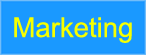
<style>
.page{position:relative;width:146px;height:55px;background:#1a99ff}
.page>*{position:absolute;margin:0}
.t1{font:27.5px "ArialMT";color:#f6ff00}
</style>
<div class="page">
<p class="t1" style="left:14px;top:17px;width:118px;height:26px">Marketing</p>
</div>
